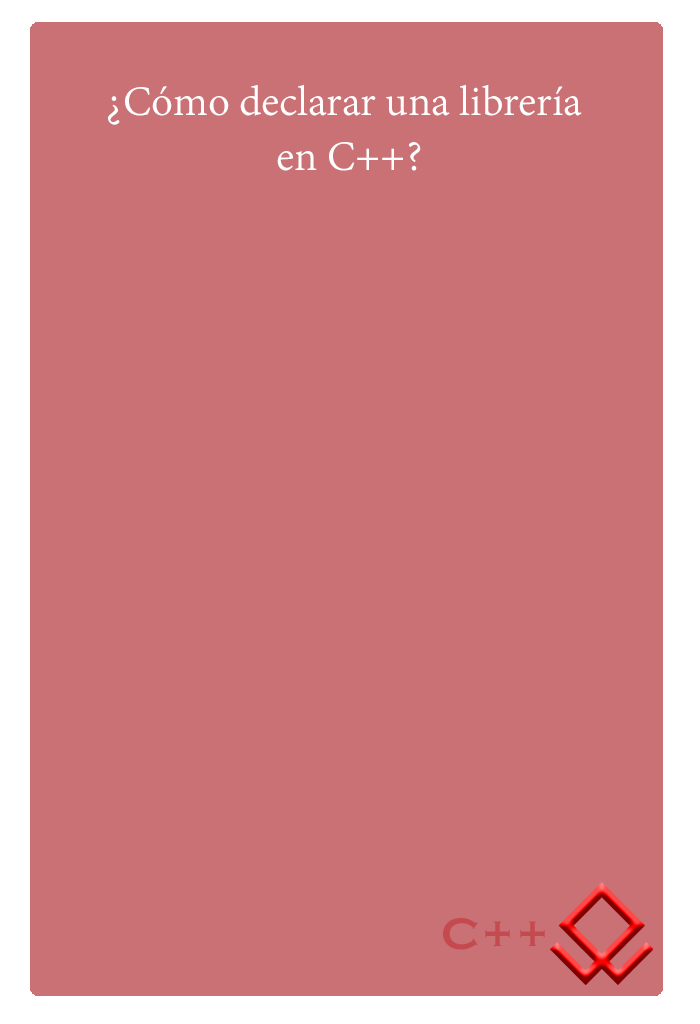
<style>
.page{position:relative;width:700px;height:1024px;background:#c97174}
.page>*{position:absolute;margin:0}
.t1{font:45.8px "AdobeDevanagari-Regular";color:#ffffff}
.t2{font:45.8px "CopperplateGothic-Bold";color:#c54a4f}
</style>
<div class="page">
<p class="t1" style="left:108px;top:84px;width:474px;height:87px;text-align:center">¿Cómo declarar una librería <br>en C++?</p>
<p class="t2" style="left:443px;top:918px;width:102px;height:32px">C++</p>
</div>
